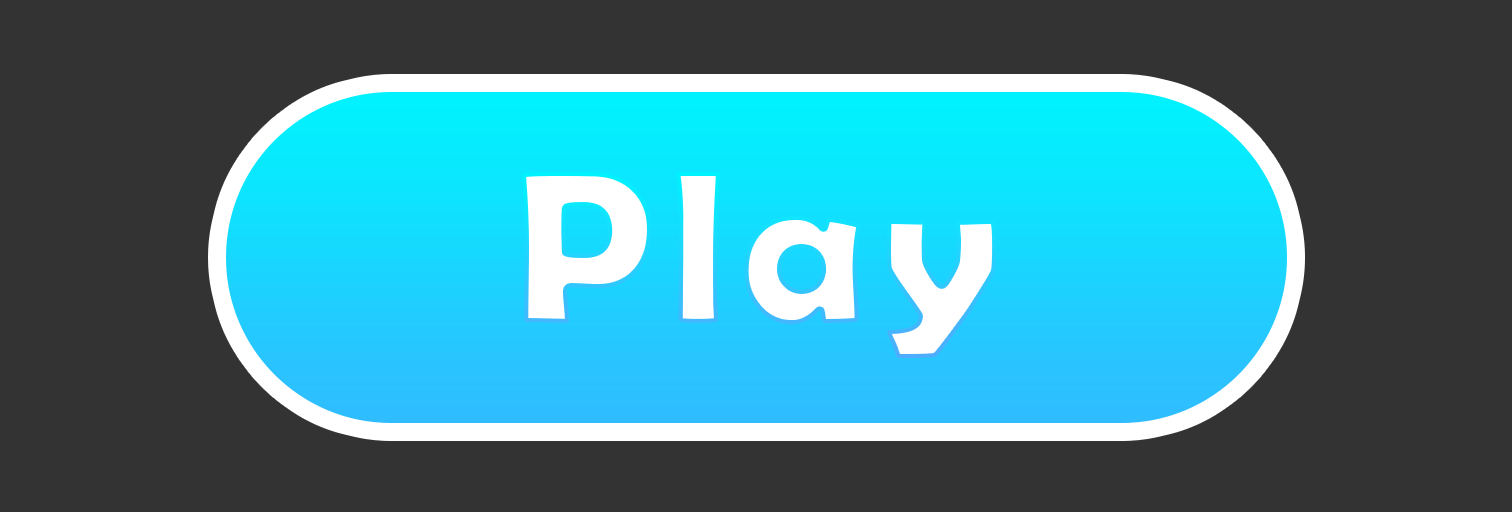
<style>
.page{position:relative;width:1512px;height:512px;background:#333333}
.page>*{position:absolute;margin:0}
.t1{font:218.9px "BerlinSansFBDemi-Bold";letter-spacing:0.06em;color:#ffffff}
</style>
<div class="page">
<p class="t1" style="left:522px;top:172px;width:475px;height:186px">Play</p>
</div>
